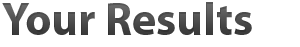
<style>
.page{position:relative;width:300px;height:47px;background:#ffffff}
.page>*{position:absolute;margin:0}
.t1{font:46px "MyriadPro-Bold";color:#464646}
</style>
<div class="page">
<p class="t1" style="left:2px;top:2px;width:250px;height:33px">Your Results</p>
</div>
